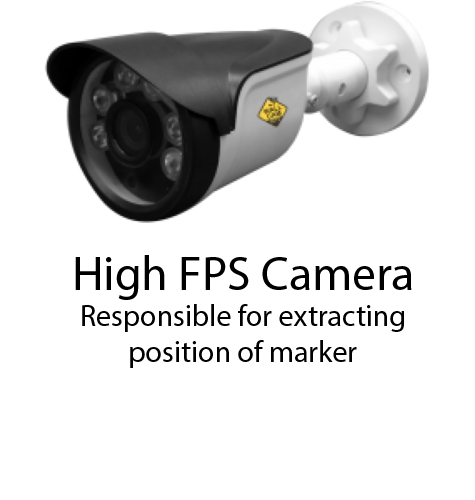
<style>
.page{position:relative;width:475px;height:500px;background:#ffffff}
.page>*{position:absolute;margin:0}
.t1{font:30px "MyriadPro-Regular";color:#000000}
.t2{font:48px "MyriadPro-Regular";color:#000000}
</style>
<div class="page">
<p class="t1" style="left:75px;top:255px;width:337px;height:113px;text-align:center"><span class="t2">High FPS Camera<br></span>Responsible for extracting <br>position of marker</p>
</div>
